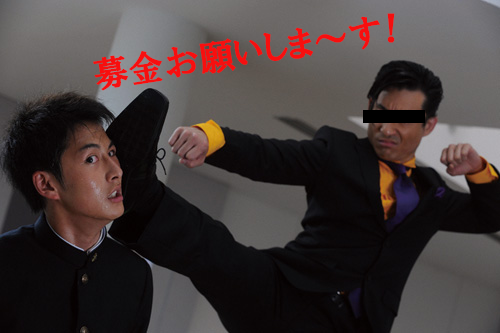
<style>
.page{position:relative;width:500px;height:333px}
.page>*{position:absolute;margin:0}
.t1{font:36px "HGPSoeiPresenceEB";color:#f70f0f}
.t2{font:36px "HGPSoeiPresenceEB";color:#f40e0e}
</style>
<div class="page">
<p class="t1" style="left:93px;top:16px;width:287px;height:75px;rotate:-9deg">募金お願いしま～す</p>
<p class="t2" style="left:387px;top:13px;width:8px;height:30px">！</p>
</div>
